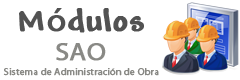
<style>
.page{position:relative;width:240px;height:80px;background:#ffffff}
.page>*{position:absolute;margin:0}
.t1{font:33.3px "Andy-Bold";color:#525252;font-weight:bold;scale:1.09 1}
.t2{font:33.3px "MyriadPro-Regular";color:#525252;font-weight:bold;scale:1.09 1}
.t3{font:25px "MyriadPro-Regular";color:#898985;font-weight:bold;scale:1.09 1}
.t4{font:9.2px "MyriadPro-Regular";color:#898985;font-weight:bold;scale:1.09 1}
</style>
<div class="page">
<p class="t1" style="left:19px;top:8px;width:125px;height:25px">M<span class="t2">ó</span>dulos</p>
<p class="t3" style="left:56px;top:43px;width:50px;height:18px">SAO</p>
<p class="t4" style="left:3px;top:68px;width:156px;height:8px">Sistema de Administración de Obra</p>
</div>
